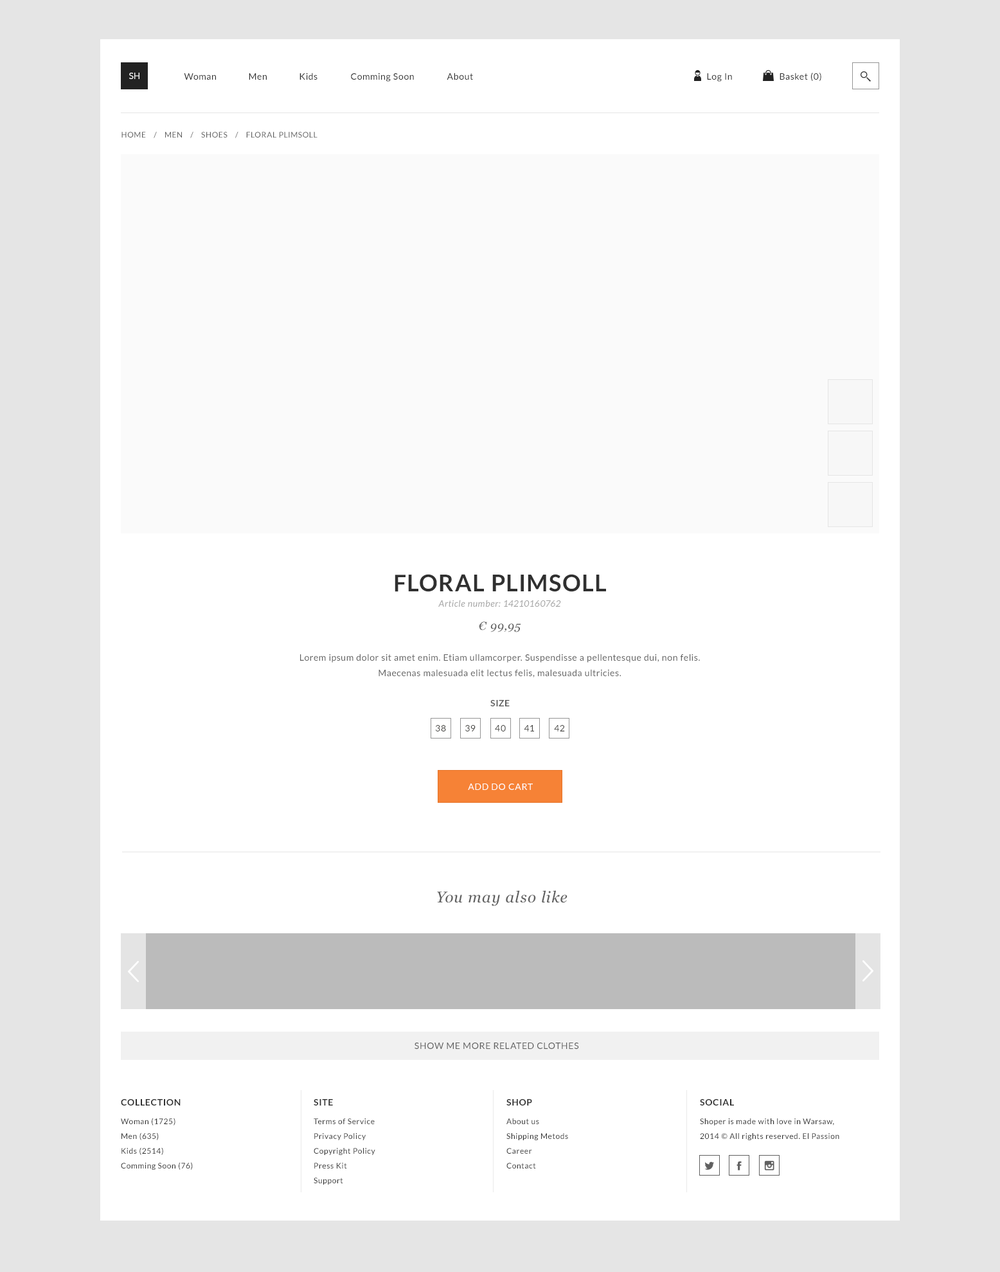
<style>
.page{position:relative;width:1000px;height:1272px;background:#ffffff}
.page>*{position:absolute;margin:0}
.t1{font:9px "Lato-Regular";color:#ffffff;text-transform:uppercase}
.t2{font:9px "Lato-Regular";letter-spacing:0.05em;color:#303030}
.t3{font:7.7px "Lato-Regular";letter-spacing:0.05em;color:#606060;text-transform:uppercase}
.t4{font:9px/15.4px "Lato-Italic";letter-spacing:0.05em;color:#a3a3a3}
.t5{font:23.1px/23.1px "Lato-Bold";letter-spacing:0.05em;color:#303030;text-transform:uppercase}
.t6{font:11.6px/23.1px "Georgia-Italic";letter-spacing:0.05em;color:#606060;text-transform:uppercase}
.t7{font:9px/15.4px "Lato-Regular";letter-spacing:0.05em;color:#606060}
.t8{font:9px "Lato-Bold";letter-spacing:0.05em;color:#606060;text-transform:uppercase}
.t9{font:9px "Lato-Regular";letter-spacing:0.05em;color:#464542;text-transform:uppercase}
.t10{font:9px "Lato-Regular";letter-spacing:0.05em;color:#ffffff;text-transform:uppercase}
.t11{font:15.4px "Georgia-Italic";letter-spacing:0.05em;color:#606060}
.t12{font:9px "Lato-Regular";letter-spacing:0.05em;color:#606060;text-transform:uppercase}
.t13{font:9px "Lato-Bold";letter-spacing:0.05em;color:#303030;text-transform:uppercase}
.t14{font:7.7px/14.8px "Lato-Regular";letter-spacing:0.05em;color:#303030}
</style>
<div class="page">
<p class="t1" style="left:129px;top:73px;width:11px;height:6px">sh</p>
<p class="t2" style="left:184px;top:73px;width:32px;height:7px">Woman</p>
<p class="t2" style="left:249px;top:73px;width:18px;height:7px">Men</p>
<p class="t2" style="left:300px;top:73px;width:18px;height:7px">Kids</p>
<p class="t2" style="left:351px;top:73px;width:63px;height:9px">Comming Soon</p>
<p class="t2" style="left:447px;top:73px;width:26px;height:7px">About</p>
<p class="t2" style="left:707px;top:73px;width:25px;height:9px">Log In</p>
<p class="t2" style="left:780px;top:73px;width:42px;height:8px">Basket (0)</p>
<p class="t3" style="left:122px;top:132px;width:196px;height:6px">HOME    /    men    /    shoes    /    FLORAL PLIMSOLL</p>
<p class="t4" style="left:395px;top:574px;width:211px;height:59px;text-align:center"><span class="t5">FLORAL PLIMSOLL<br></span>Article number: 14210160762<br><span class="t6">€ 99,95</span></p>
<p class="t7" style="left:300px;top:654px;width:400px;height:24px;text-align:center">Lorem ipsum dolor sit amet enim. Etiam ullamcorper. Suspendisse a pellentesque dui, non felis. <br>Maecenas malesuada elit lectus felis, malesuada ultricies.</p>
<p class="t8" style="left:491px;top:700px;width:19px;height:6px">Size</p>
<p class="t9" style="left:435px;top:725px;width:11px;height:7px">38</p>
<p class="t9" style="left:465px;top:725px;width:11px;height:7px">39</p>
<p class="t9" style="left:495px;top:725px;width:11px;height:7px">40</p>
<p class="t9" style="left:524px;top:725px;width:10px;height:7px">41</p>
<p class="t9" style="left:554px;top:725px;width:11px;height:7px">42</p>
<p class="t10" style="left:468px;top:784px;width:65px;height:6px">Add do cart</p>
<p class="t11" style="left:437px;top:890px;width:131px;height:16px">You may also like</p>
<p class="t12" style="left:415px;top:1043px;width:164px;height:6px">Show me more related clothes</p>
<p class="t13" style="left:121px;top:1099px;width:60px;height:7px">Collection</p>
<p class="t13" style="left:314px;top:1099px;width:19px;height:7px">site</p>
<p class="t13" style="left:507px;top:1099px;width:25px;height:7px">Shop</p>
<p class="t13" style="left:700px;top:1099px;width:34px;height:7px">social</p>
<p class="t14" style="left:121px;top:1118px;width:72px;height:52px">Woman (1725)<br>Men (635)<br>Kids (2514)<br>Comming Soon (76)</p>
<p class="t14" style="left:314px;top:1119px;width:61px;height:66px">Terms of Service <br>Privacy Policy <br>Copyright Policy <br>Press Kit <br>Support</p>
<p class="t14" style="left:507px;top:1119px;width:61px;height:50px">About us<br>Shipping Metods<br>Career<br>Contact</p>
<p class="t14" style="left:700px;top:1119px;width:140px;height:21px">Shoper is made with love in Warsaw, <br>2014 © All rights reserved. El Passion</p>
</div>
